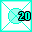
<style>
.page{position:relative;width:32px;height:32px;background:#ffffff}
.page>*{position:absolute;margin:0}
.t1{font:11px "TrebuchetMS-Bold";color:#00ffd2}
</style>
<div class="page">
<p class="t1" style="left:19px;top:12px;width:11px;height:8px">20</p>
</div>
